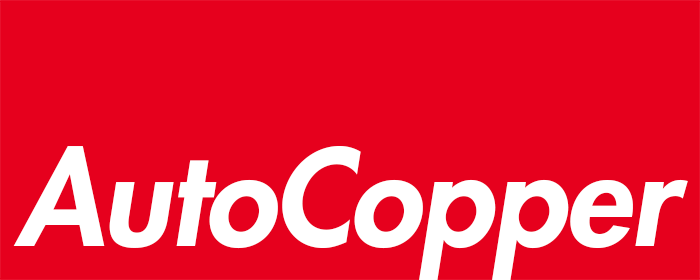
<style>
.page{position:relative;width:700px;height:280px;background:#e6001d}
.page>*{position:absolute;margin:0}
.t1{font:130.2px "Futura-HeavyOblique";color:#ffffff}
</style>
<div class="page">
<p class="t1" style="left:13px;top:146px;width:675px;height:134px">AutoCopper</p>
</div>
